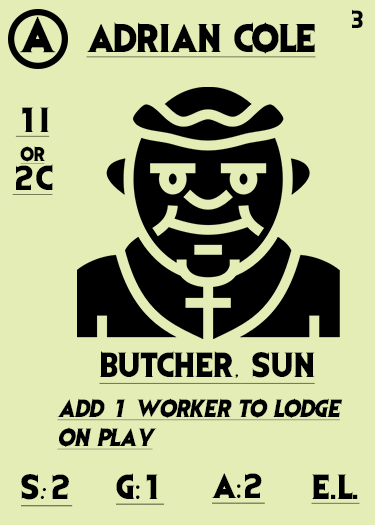
<style>
.page{position:relative;width:375px;height:525px;background:#e3edb5}
.page>*{position:absolute;margin:0}
.t1{font:41.7px "EvilDead";letter-spacing:-0.05em;color:#000000}
.t2{font:20.8px "EvilDead";letter-spacing:-0.05em;color:#000000}
.t3{font:33.3px "EvilDead";color:#000000;text-decoration:underline}
.t4{font:29.2px/29.2px "EvilDead";color:#000000;text-decoration:underline}
.t5{font:16.7px/29.2px "EvilDead";color:#000000;text-decoration:underline}
.t6{font:29.2px "EvilDead";color:#000000;text-decoration:underline}
.t7{font:29.2px "Fadli-Script";color:#000000;text-decoration:underline}
.t8{font:20.8px/29.2px "EvilDead";color:#000000;font-style:italic;text-decoration:underline}
.t9{font:29.2px "MyriadPro-Regular";color:#000000;text-decoration:underline}
</style>
<div class="page">
<p class="t1" style="left:19px;top:16px;width:37px;height:37px">A</p>
<p class="t2" style="left:352px;top:9px;width:11px;height:19px">3</p>
<p class="t3" style="left:86px;top:22px;width:230px;height:36px">ADRIAN COLE</p>
<p class="t4" style="left:12px;top:107px;width:41px;height:88px;text-align:center">1I<br><span class="t5">or<br></span>2C</p>
<p class="t6" style="left:99px;top:351px;width:216px;height:33px">BUTCHER<span class="t7">,</span> SUN</p>
<p class="t8" style="left:57px;top:398px;width:285px;height:52px">Add 1 worker to lodge<br>ON PLAY</p>
<p class="t6" style="left:116px;top:473px;width:49px;height:32px">G<span class="t9">:</span>1</p>
<p class="t6" style="left:211px;top:473px;width:54px;height:31px">A<span class="t9">:</span>2</p>
<p class="t6" style="left:21px;top:474px;width:52px;height:33px">S<span class="t7">:</span>2</p>
<p class="t6" style="left:311px;top:474px;width:49px;height:30px">E.L.</p>
</div>
